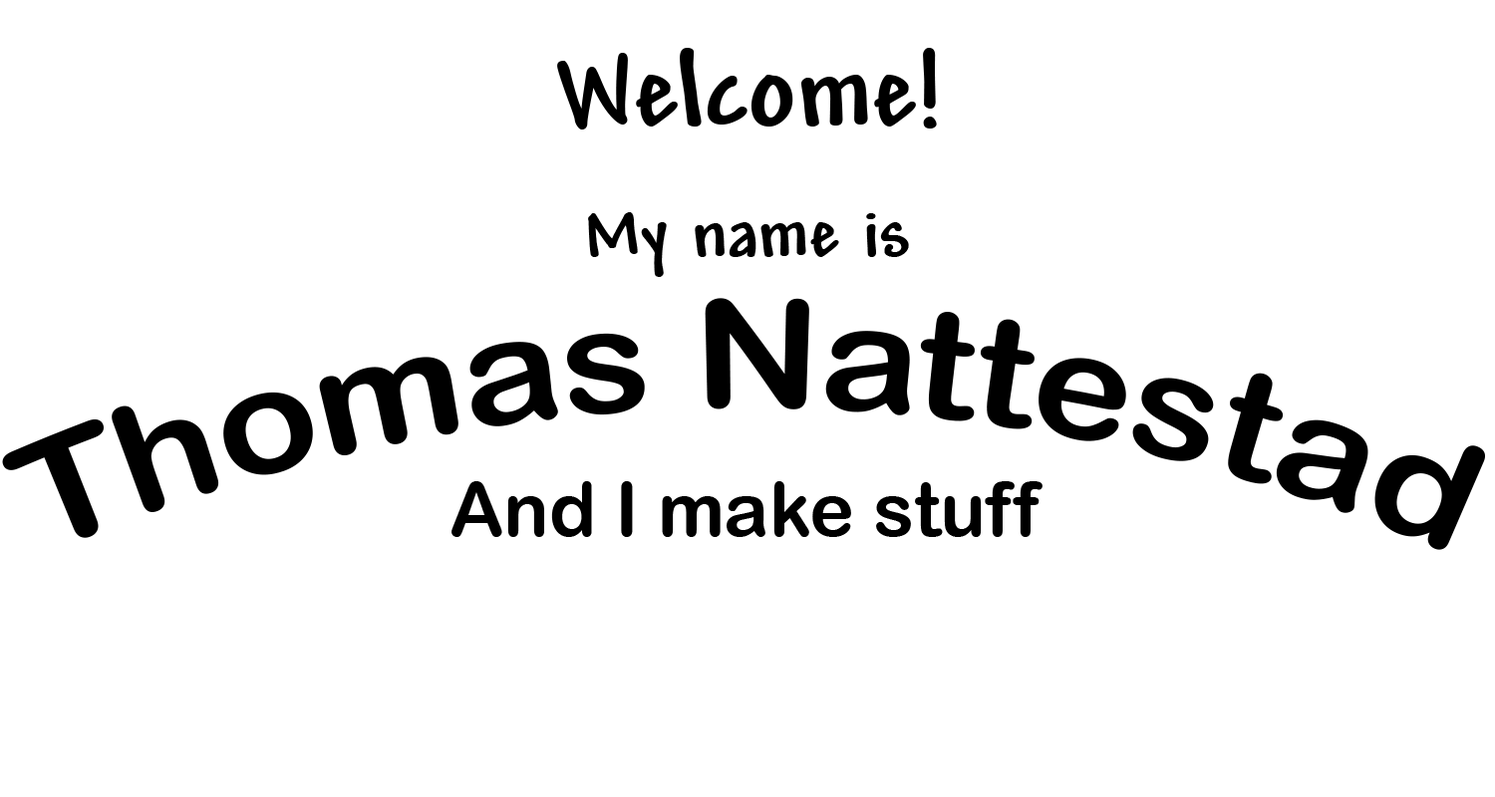
<style>
.page{position:relative;width:1495px;height:797px;background:#ffffff}
.page>*{position:absolute;margin:0}
.t1{font:113px "Andy-Bold";color:#000000}
.t2{font:75.3px "Andy-Bold";color:#000000}
.t3{font:149px "ArialRoundedMTBold";color:#000000}
.t4{font:75.3px "ArialRoundedMTBold";color:#000000}
</style>
<div class="page">
<p class="t1" style="left:557px;top:48px;width:380px;height:82px">Welcome!</p>
<p class="t2" style="left:588px;top:212px;width:321px;height:65px">My name is</p>
<p class="t3" style="left:2px;top:298px;width:1483px;height:252px">Thomas Nattestad</p>
<p class="t4" style="left:452px;top:481px;width:591px;height:56px">And I make stuff</p>
</div>
